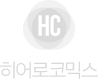
<style>
.page{position:relative;width:98px;height:79px;background:#ffffff}
.page>*{position:absolute;margin:0}
.t1{font:20px "Arita-dotum-Medium_TTF";letter-spacing:-0.05em;color:#d9d9d9}
</style>
<div class="page">
<p class="t1" style="left:0px;top:61px;width:98px;height:18px">히어로코믹스</p>
</div>
